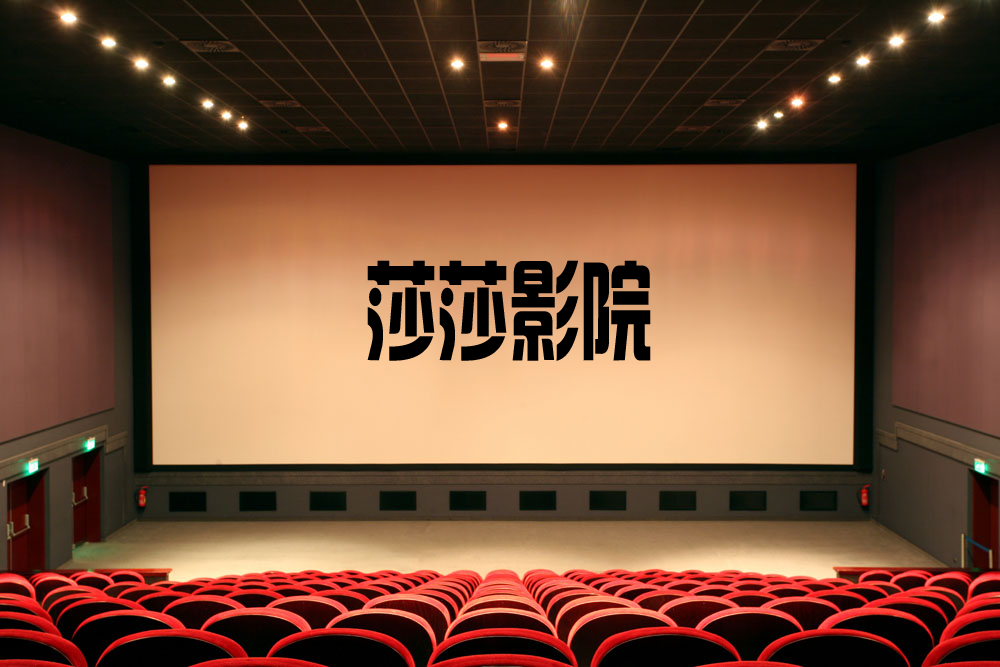
<style>
.page{position:relative;width:1000px;height:667px}
.page>*{position:absolute;margin:0}
.t1{font:108px "hzgb";color:#000000;scale:0.67 1}
</style>
<div class="page">
<p class="t1" style="left:367px;top:260px;width:284px;height:101px">莎莎影院</p>
</div>
